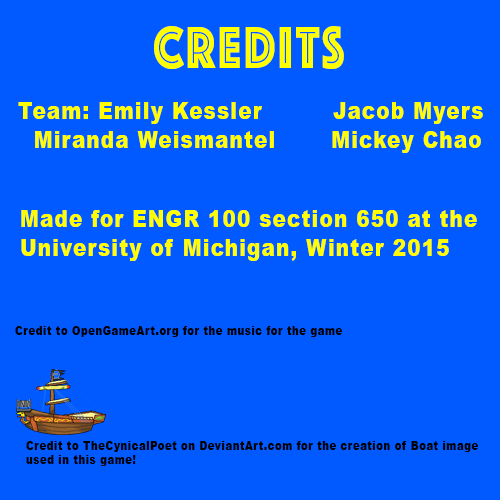
<style>
.page{position:relative;width:500px;height:500px;background:#005aff}
.page>*{position:absolute;margin:0}
.t1{font:61.4px "Phosphate-Inline";letter-spacing:0.06em;color:#ffff00;scale:0.81 1}
.t2{font:24px "Arial-Black";letter-spacing:0.06em;color:#ffff00;scale:0.83 1}
.t3{font:12px "Arial-Black";letter-spacing:0.06em;color:#000000;scale:0.83 1}
</style>
<div class="page">
<p class="t1" style="left:154px;top:26px;width:190px;height:43px">Credits</p>
<p class="t2" style="left:18px;top:102px;width:465px;height:51px">Team: Emily Kessler         Jacob Myers<br>  Miranda Weismantel       Mickey Chao</p>
<p class="t2" style="left:21px;top:210px;width:456px;height:51px">Made for ENGR 100 section 650 at the<br>University of Michigan, Winter 2015</p>
<p class="t3" style="left:15px;top:326px;width:327px;height:11px">Credit to OpenGameArt.org for the music for the game</p>
<p class="t3" style="left:26px;top:441px;width:452px;height:25px">Credit to TheCynicalPoet on DeviantArt.com for the creation of Boat image <br>used in this game!</p>
</div>
